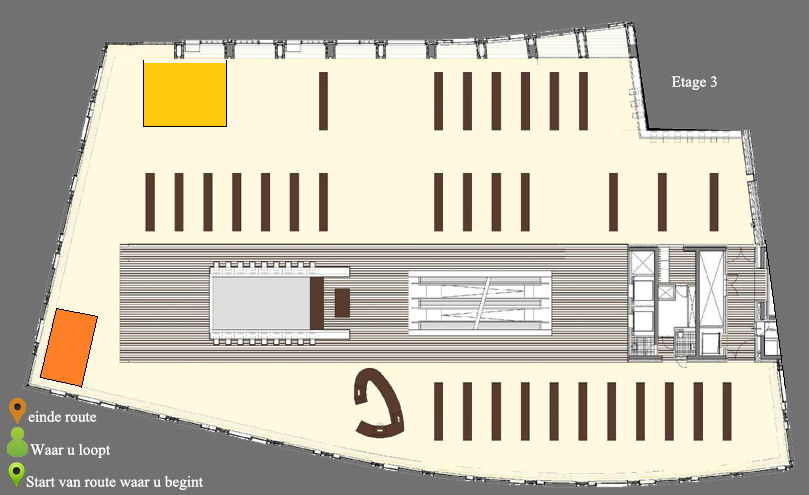
<style>
.page{position:relative;width:809px;height:495px;background:#fff9df}
.page>*{position:absolute;margin:0}
.t1{font:19px "Aparajita";color:#ffffff}
</style>
<div class="page">
<p class="t1" style="left:671px;top:76px;width:46px;height:14px">Etage 3</p>
<p class="t1" style="left:28px;top:410px;width:69px;height:12px">einde route</p>
<p class="t1" style="left:30px;top:443px;width:81px;height:15px">Waar u loopt</p>
<p class="t1" style="left:26px;top:475px;width:178px;height:15px">Start van route waar u begint</p>
</div>
